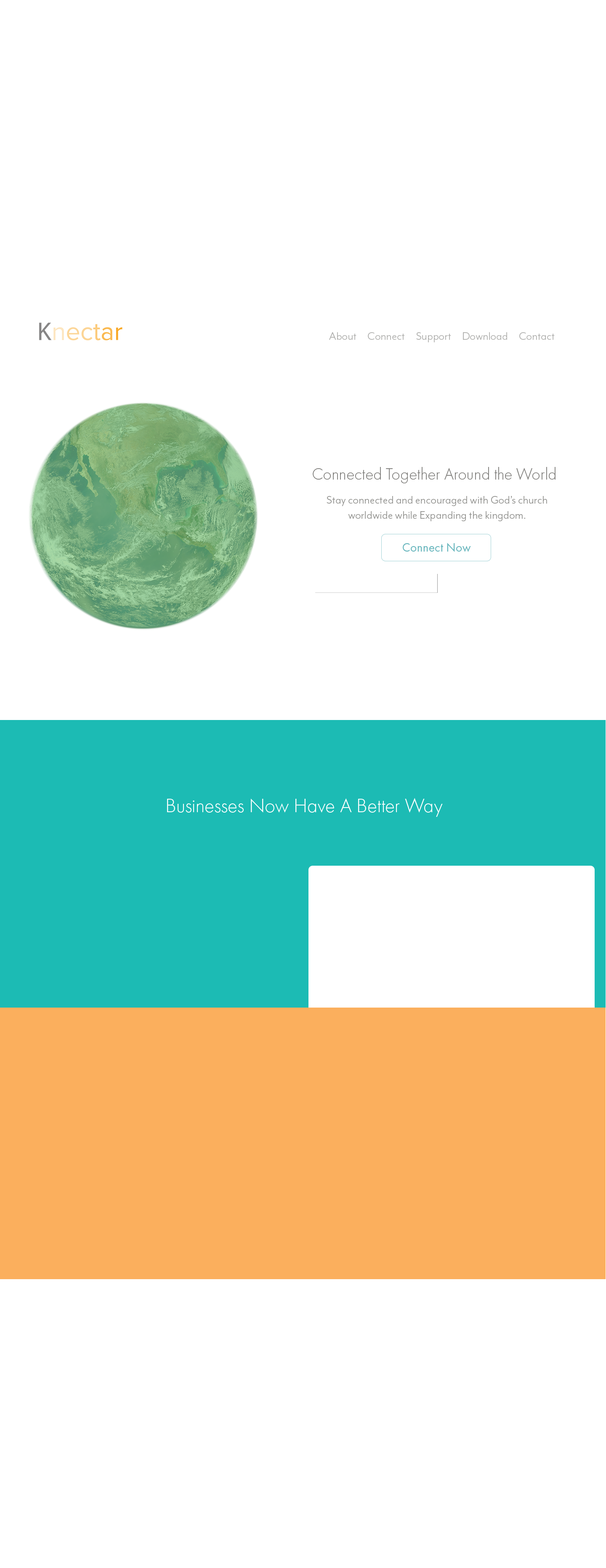
<style>
.page{position:relative;width:606px;height:1568px;background:#ffffff}
.page>*{position:absolute;margin:0}
.t1{font:12.6px "MrEavesModOT-Book";color:#aeaeac}
.t2{font:16.8px "FuturaPT-Light";color:#7e7d7a}
.t3{font:12.6px "MrEavesModOT-Book";color:#92928f}
.t4{font:12.6px "FuturaPT-Book";color:#66b5bc}
.t5{font:20.2px "FuturaPT-Light";color:#ffffff}
</style>
<div class="page">
<p class="t1" style="left:329px;top:332px;width:226px;height:10px">About     Connect     Support     Download     Contact</p>
<p class="t2" style="left:313px;top:467px;width:243px;height:16px">Connected Together Around the World</p>
<p class="t3" style="left:327px;top:496px;width:220px;height:25px;text-align:center">Stay connected and encouraged with God’s church worldwide while Expanding the kingdom.</p>
<p class="t4" style="left:403px;top:543px;width:68px;height:9px">Connect Now</p>
<p class="t5" style="left:167px;top:798px;width:276px;height:19px">Businesses Now Have A Better Way</p>
</div>
